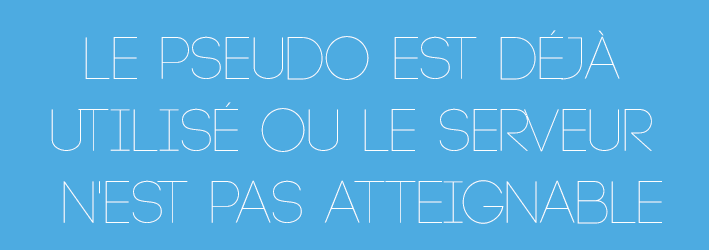
<style>
.page{position:relative;width:709px;height:250px;background:#4dabe1}
.page>*{position:absolute;margin:0}
.t1{font:60px "Code-Light";color:#ffffff}
</style>
<div class="page">
<p class="t1" style="left:51px;top:30px;width:611px;height:194px;text-align:center">Le pseudo est déjà <br>utilisé ou le serveur <br>n'est pas atteignable</p>
</div>
